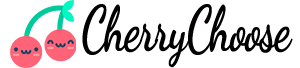
<style>
.page{position:relative;width:300px;height:68px;background:#ffffff}
.page>*{position:absolute;margin:0}
.t1{font:63px "DancingScript-Bold";letter-spacing:-0.025em;color:#010101;scale:0.71 1}
.t2{font:63px "DancingScript-Bold";letter-spacing:-0.025em;color:#040102;scale:0.71 1}
.t3{font:63px "DancingScript-Bold";letter-spacing:-0.025em;color:#000000;scale:0.71 1}
</style>
<div class="page">
<p class="t1" style="left:82px;top:4px;width:211px;height:64px">Cherry<span class="t2">C</span><span class="t3">hoose</span></p>
</div>
